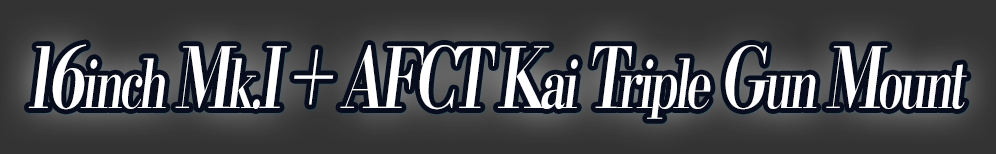
<style>
.page{position:relative;width:996px;height:154px}
.page>*{position:absolute;margin:0}
.t1{font:84px "KochoStd-Heavy";letter-spacing:-0.08em;color:#ffffff;font-style:italic;scale:0.7 1}
.t2{font:67.2px "KochoStd-Heavy";letter-spacing:-0.08em;color:#ffffff;font-style:italic;scale:0.7 1}
</style>
<div class="page">
<p class="t1" style="left:28px;top:44px;width:939px;height:75px">16<span class="t2">inch </span>M<span class="t2">k.</span>I + AFCT K<span class="t2">ai </span>T<span class="t2">riple </span>G<span class="t2">un </span>M<span class="t2">ount</span></p>
</div>
